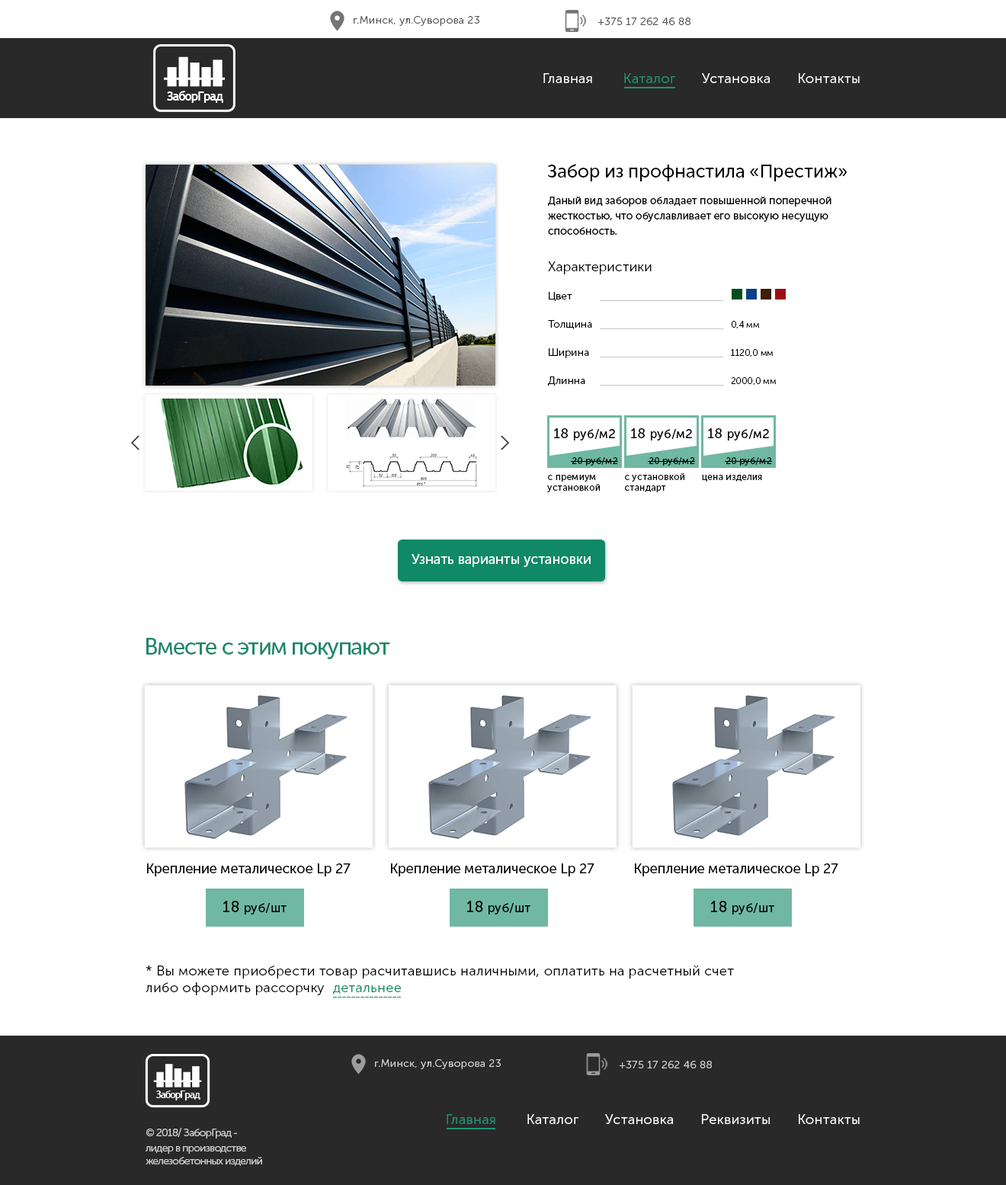
<style>
.page{position:relative;width:1006px;height:1185px;background:#ffffff}
.page>*{position:absolute;margin:0}
.t1{font:10.7px "MuseoSansCyrl-300";letter-spacing:0.025em;color:#585858}
.t2{font:13.7px "MuseoSansCyrl-300";letter-spacing:0.025em;color:#ffffff}
.t3{font:13.7px "MuseoSansCyrl-300";letter-spacing:0.025em;color:#fefefe}
.t4{font:13.7px "MuseoSansCyrl-300";letter-spacing:0.025em;color:#209573}
.t5{font:12.6px "TrebuchetMS-Bold";letter-spacing:-0.075em;color:#ffffff}
.t6{font:18.3px "MuseoSansCyrl-500";color:#000000}
.t7{font:10.7px/15.2px "MuseoSansCyrl-500";color:#000000}
.t8{font:13.7px "MuseoSansCyrl-300";color:#000000}
.t9{font:10.7px "MuseoSansCyrl-300";color:#000000}
.t10{font:9.1px "MuseoSansCyrl-300";color:#000000}
.t11{font:12.2px "MuseoSansCyrl-500";letter-spacing:0.025em;color:#000000}
.t12{font:13.7px "MuseoSansCyrl-500";letter-spacing:0.025em;color:#000000}
.t13{font:9.1px "MuseoSansCyrl-500";letter-spacing:0.025em;color:#000000}
.t14{font:13.7px "MuseoSansCyrl-500";color:#ffffff}
.t15{font:22.9px "MuseoSansCyrl-500";letter-spacing:-0.05em;color:#21886a}
.t16{font:13.7px "MuseoSansCyrl-500";color:#000000}
.t17{font:15.2px "MuseoSansCyrl-500";letter-spacing:0.025em;color:#000000}
.t18{font:13.7px "MuseoSansCyrl-300";letter-spacing:0.025em;color:#000000}
.t19{font:13.7px "MuseoSansCyrl-300";letter-spacing:0.025em;color:#108966}
.t20{font:10.7px "MuseoSansCyrl-300";letter-spacing:0.025em;color:#d4d4d4}
.t21{font:10px "TrebuchetMS-Bold";letter-spacing:-0.075em;color:#ffffff}
.t22{font:10.7px "MuseoSansCyrl-300";letter-spacing:-0.05em;color:#cfcfcf}
.t23{font:10.7px/15.2px "MuseoSansCyrl-300";letter-spacing:-0.05em;color:#cfcfcf}
</style>
<div class="page">
<p class="t1" style="left:354px;top:16px;width:125px;height:10px">г.Минск, ул.Суворова 23</p>
<p class="t1" style="left:598px;top:18px;width:93px;height:7px">+375 17 262 46 88</p>
<p class="t2" style="left:543px;top:73px;width:317px;height:10px"><span class="t3">Главная        </span><span class="t4">Каталог </span>      Установка       Контакты</p>
<p class="t5" style="left:167px;top:91px;width:56px;height:12px">ЗаборГрад</p>
<p class="t6" style="left:548px;top:164px;width:300px;height:17px">Забор из профнастила «Престиж»</p>
<p class="t7" style="left:548px;top:197px;width:284px;height:38px">Даный вид заборов обладает повышенной поперечной жесткостью, что обуславливает его высокую несущую способность.</p>
<p class="t8" style="left:548px;top:261px;width:104px;height:13px">Характеристики</p>
<p class="t9" style="left:549px;top:292px;width:23px;height:10px">Цвет</p>
<p class="t9" style="left:548px;top:320px;width:44px;height:9px">Толщина</p>
<p class="t10" style="left:731px;top:321px;width:28px;height:8px">0,4 мм</p>
<p class="t9" style="left:549px;top:348px;width:40px;height:10px">Ширина</p>
<p class="t10" style="left:731px;top:349px;width:42px;height:8px">1120,0 мм</p>
<p class="t9" style="left:548px;top:377px;width:37px;height:9px">Длинна</p>
<p class="t10" style="left:731px;top:377px;width:45px;height:8px">2000,0 мм</p>
<p class="t11" style="left:554px;top:428px;width:61px;height:13px"><span class="t12">18 </span>руб/м2</p>
<p class="t11" style="left:631px;top:428px;width:61px;height:13px"><span class="t12">18 </span>руб/м2</p>
<p class="t11" style="left:708px;top:428px;width:61px;height:13px"><span class="t12">18 </span>руб/м2</p>
<p class="t13" style="left:572px;top:457px;width:46px;height:9px">20 руб/м2</p>
<p class="t13" style="left:649px;top:457px;width:46px;height:9px">20 руб/м2</p>
<p class="t13" style="left:726px;top:457px;width:46px;height:9px">20 руб/м2</p>
<p class="t13" style="left:625px;top:473px;width:59px;height:19px">с установкой<br>стандарт</p>
<p class="t13" style="left:547px;top:475px;width:53px;height:17px">с премиум <br>установкой</p>
<p class="t13" style="left:702px;top:475px;width:60px;height:7px">цена изделия</p>
<p class="t14" style="left:412px;top:554px;width:179px;height:13px">Узнать варианты установки</p>
<p class="t15" style="left:146px;top:638px;width:244px;height:21px">Вместе с этим покупают</p>
<p class="t16" style="left:147px;top:864px;width:204px;height:13px">Крепление металическое Lp 27</p>
<p class="t16" style="left:391px;top:864px;width:204px;height:13px">Крепление металическое Lp 27</p>
<p class="t16" style="left:635px;top:864px;width:203px;height:13px">Крепление металическое Lp 27</p>
<p class="t11" style="left:223px;top:901px;width:64px;height:14px"><span class="t17">18 </span>руб/шт</p>
<p class="t11" style="left:466px;top:901px;width:64px;height:14px"><span class="t17">18 </span>руб/шт</p>
<p class="t11" style="left:710px;top:901px;width:64px;height:14px"><span class="t17">18 </span>руб/шт</p>
<p class="t18" style="left:146px;top:966px;width:588px;height:29px">* Вы можете приобрести товар расчитавшись наличными, оплатить на расчетный счет<br>либо оформить рассорчку  <span class="t19">детальнее</span></p>
<p class="t20" style="left:375px;top:1059px;width:126px;height:10px">г.Минск, ул.Суворова 23</p>
<p class="t20" style="left:619px;top:1061px;width:93px;height:8px">+375 17 262 46 88</p>
<p class="t21" style="left:155px;top:1091px;width:45px;height:10px">ЗаборГрад</p>
<p class="t2" style="left:447px;top:1114px;width:413px;height:10px"><span class="t4">Главная </span>       Каталог       Установка       Реквизиты       Контакты</p>
<p class="t22" style="left:146px;top:1128px;width:116px;height:38px">© 2018/ ЗаборГрад - <br><span class="t23">лидер в производстве <br></span>железобетонных изделий</p>
</div>
